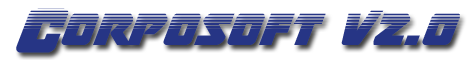
<style>
.page{position:relative;width:470px;height:60px;background:#ffffff}
.page>*{position:absolute;margin:0}
.t1{font:48px "ThunderstrikeHalftone";color:#263585}
</style>
<div class="page">
<p class="t1" style="left:16px;top:8px;width:444px;height:45px">Corposoft v2.0</p>
</div>
